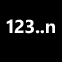
<style>
.page{position:relative;width:62px;height:62px;background:#000000}
.page>*{position:absolute;margin:0}
.t1{font:18.7px "SegoeWP-Bold";letter-spacing:-0.01em;color:#ffffff}
</style>
<div class="page">
<p class="t1" style="left:6px;top:19px;width:49px;height:15px">123..n</p>
</div>
